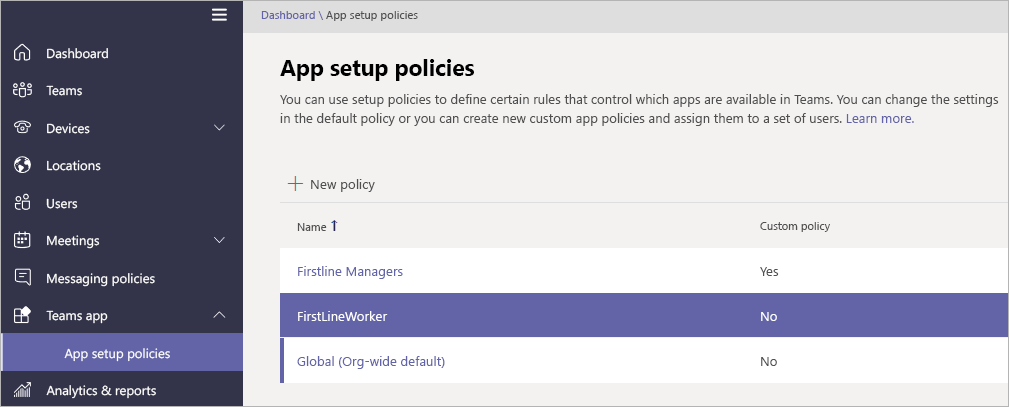
<style>
.page{position:relative;width:1009px;height:407px;background:#f3f2f1}
.page>*{position:absolute;margin:0}
.t1{font:11.3px "SegoeUI";color:#505050}
.t2{font:11.3px "SegoeUI";color:#6264a7}
.t3{font:13px "SegoeUI";color:#ffffff}
.t4{font:22.5px "SegoeUI-Bold";color:#000000}
.t5{font:13.1px/19.2px "SegoeUI";color:#505050}
.t6{font:13.1px/19.2px "SegoeUI";color:#6264a7}
.t7{font:13.3px "SegoeUI";color:#505050}
.t8{font:11.2px "SegoeUI";color:#505050}
.t9{font:13.2px "SegoeUI";color:#6264a7}
.t10{font:13.2px "SegoeUI";color:#505050}
.t11{font:13.2px "SegoeUI";color:#ffffff}
</style>
<div class="page">
<p class="t1" style="left:261px;top:11px;width:157px;height:10px"><span class="t2">Dashboard \ </span>App setup policies</p>
<p class="t3" style="left:47px;top:48px;width:61px;height:11px">Dashboard</p>
<p class="t4" style="left:280px;top:59px;width:194px;height:22px">App setup policies</p>
<p class="t3" style="left:46px;top:85px;width:36px;height:11px">Teams</p>
<p class="t5" style="left:280px;top:94px;width:719px;height:32px">You can use setup policies to define certain rules that control which apps are available in Teams. You can change the settings<br>in the default policy or you can create new custom app policies and assign them to a set of users. <span class="t6">Learn more.</span></p>
<p class="t3" style="left:47px;top:123px;width:43px;height:11px">Devices</p>
<p class="t3" style="left:47px;top:160px;width:54px;height:11px">Locations</p>
<p class="t7" style="left:311px;top:179px;width:64px;height:13px">New policy</p>
<p class="t3" style="left:46px;top:198px;width:32px;height:11px">Users</p>
<p class="t8" style="left:760px;top:222px;width:70px;height:10px">Custom policy</p>
<p class="t8" style="left:297px;top:223px;width:30px;height:8px">Name</p>
<p class="t3" style="left:47px;top:235px;width:53px;height:14px">Meetings</p>
<p class="t9" style="left:298px;top:266px;width:105px;height:13px">Firstline Managers</p>
<p class="t10" style="left:760px;top:267px;width:19px;height:9px">Yes</p>
<p class="t3" style="left:47px;top:273px;width:108px;height:14px">Messaging policies</p>
<p class="t3" style="left:46px;top:310px;width:62px;height:14px">Teams app</p>
<p class="t11" style="left:298px;top:311px;width:90px;height:10px">FirstLineWorker</p>
<p class="t11" style="left:761px;top:312px;width:16px;height:9px">No</p>
<p class="t3" style="left:64px;top:348px;width:106px;height:14px">App setup policies</p>
<p class="t9" style="left:297px;top:356px;width:148px;height:13px">Global (Org-wide default)</p>
<p class="t10" style="left:761px;top:357px;width:16px;height:9px">No</p>
<p class="t3" style="left:46px;top:385px;width:110px;height:14px">Analytics &amp; reports</p>
</div>
